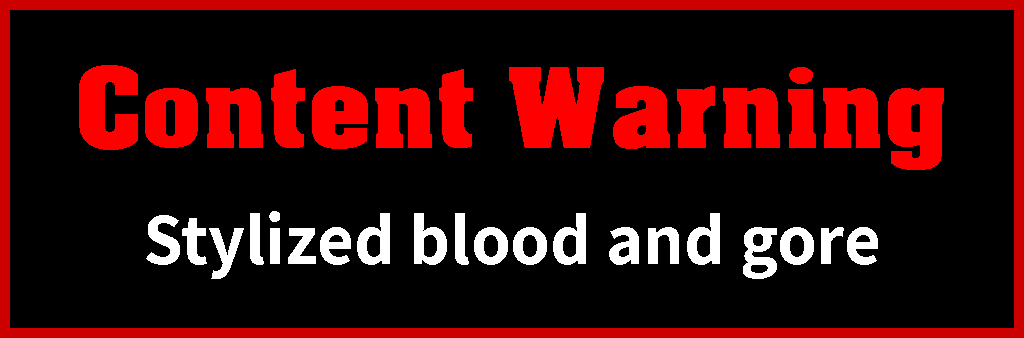
<style>
.page{position:relative;width:1024px;height:338px;background:#000000}
.page>*{position:absolute;margin:0}
.t1{font:106.9px "AcmeFont";color:#ff0000}
.t2{font:72px "Assistant-Bold";color:#ffffff}
</style>
<div class="page">
<p class="t1" style="left:79px;top:65px;width:865px;height:105px">Content Warning</p>
<p class="t2" style="left:146px;top:211px;width:732px;height:68px">Stylized blood and gore</p>
</div>
